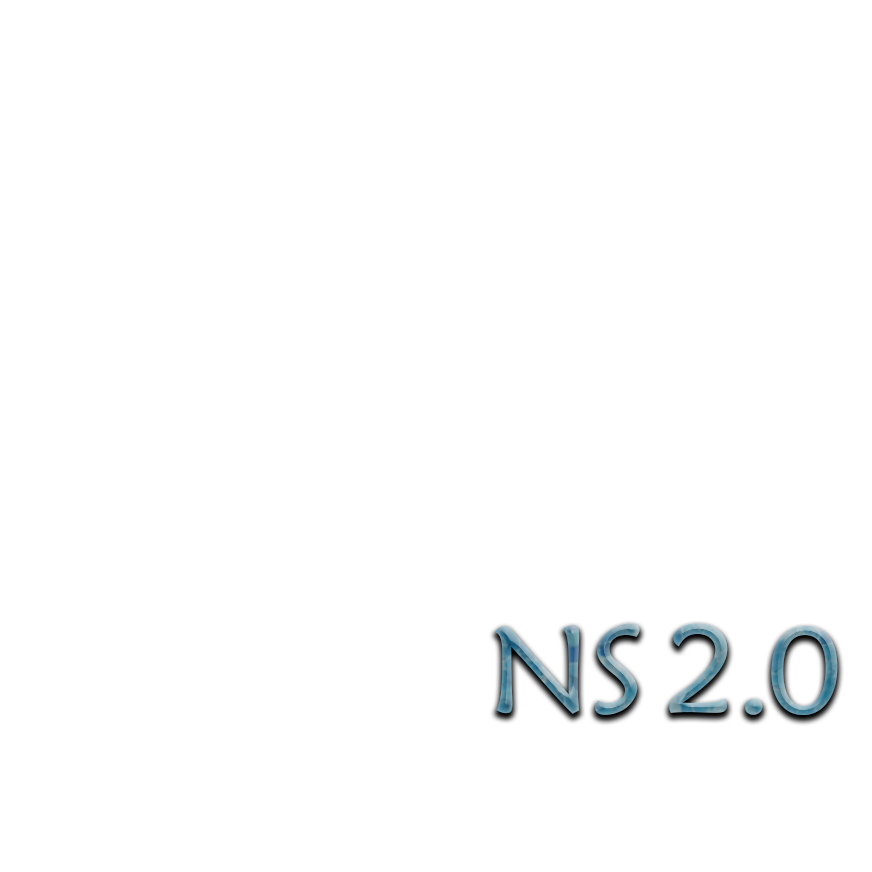
<style>
.page{position:relative;width:872px;height:872px;background:#ffffff}
.page>*{position:absolute;margin:0}
.t1{font:124.7px "STXinwei";letter-spacing:-0.03em}
</style>
<div class="page">
<p class="t1" style="left:495px;top:623px;width:343px;height:92px">NS 2.0</p>
</div>
